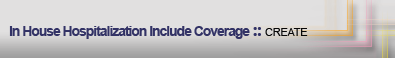
<style>
.page{position:relative;width:395px;height:58px;background:#e1e0e0}
.page>*{position:absolute;margin:0}
.t1{font:14px "Arial-BoldMT";letter-spacing:-0.075em;color:#333366}
.t2{font:18px "SegoeUI-Bold";letter-spacing:-0.025em;color:#333366}
.t3{font:11px "ArialMT";letter-spacing:-0.025em;color:#070707}
</style>
<div class="page">
<p class="t1" style="left:9px;top:26px;width:299px;height:13px">In House Hospitalization Include Coverage <span class="t2">:: </span><span class="t3">CREATE</span></p>
</div>
